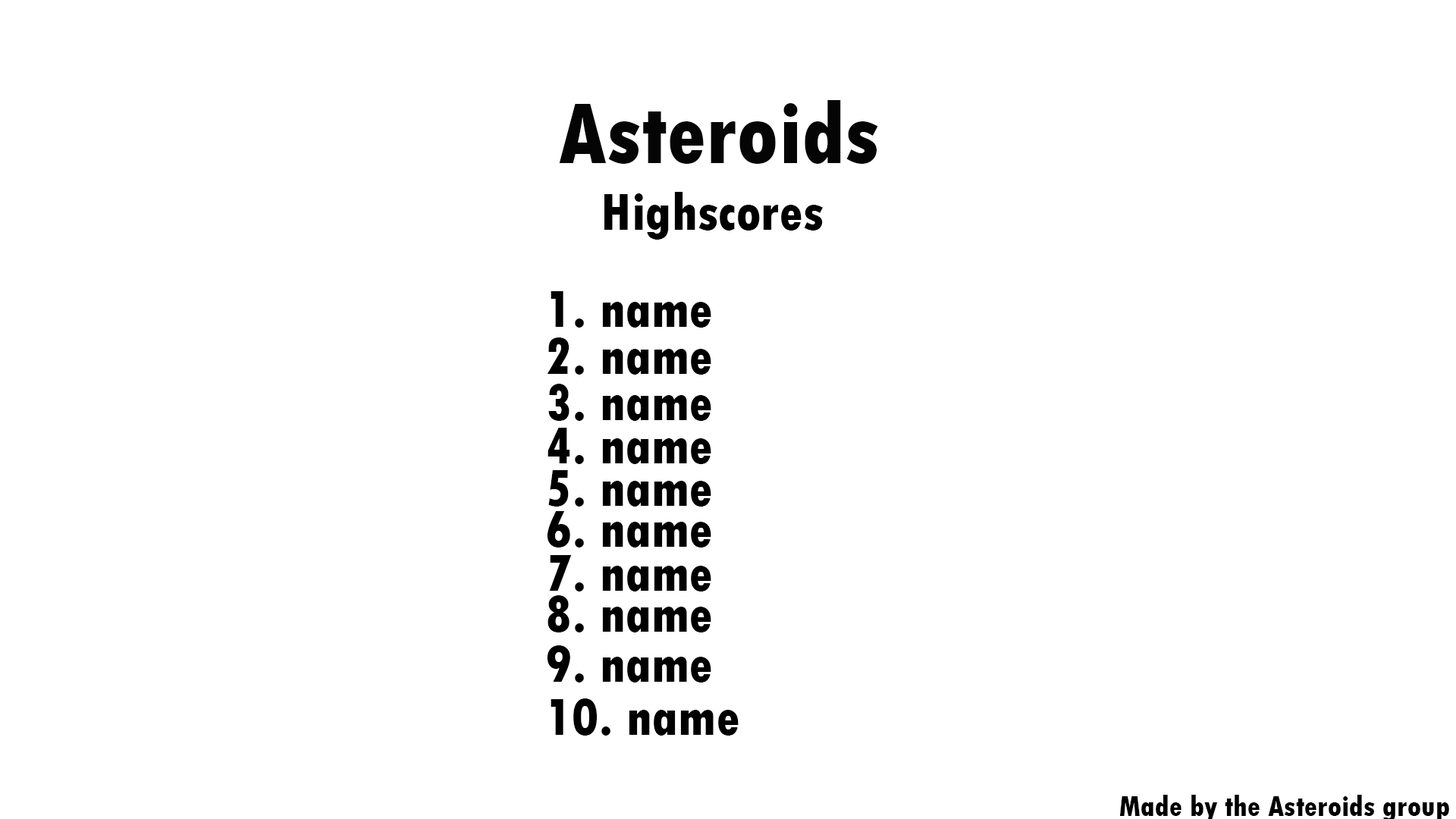
<style>
.page{position:relative;width:1456px;height:819px;background:#ffffff}
.page>*{position:absolute;margin:0}
.t1{font:91px "TwCenMT-CondensedExtraBold";color:#000000}
.t2{font:54.6px "TwCenMT-CondensedExtraBold";color:#000000}
</style>
<div class="page">
<p class="t1" style="left:559px;top:100px;width:319px;height:64px">Asteroids</p>
<p class="t2" style="left:604px;top:192px;width:219px;height:48px">Highscores</p>
<p class="t2" style="left:551px;top:291px;width:160px;height:37px">1. name</p>
<p class="t2" style="left:547px;top:337px;width:164px;height:38px">2. name</p>
<p class="t2" style="left:548px;top:384px;width:163px;height:37px">3. name</p>
<p class="t2" style="left:548px;top:428px;width:163px;height:36px">4. name</p>
<p class="t2" style="left:548px;top:470px;width:163px;height:37px">5. name</p>
<p class="t2" style="left:547px;top:511px;width:164px;height:37px">6. name</p>
<p class="t2" style="left:549px;top:555px;width:162px;height:36px">7. name</p>
<p class="t2" style="left:548px;top:595px;width:163px;height:37px">8. name</p>
<p class="t2" style="left:547px;top:645px;width:164px;height:37px">9. name</p>
<p class="t2" style="left:551px;top:698px;width:188px;height:38px">10. name</p>
</div>
